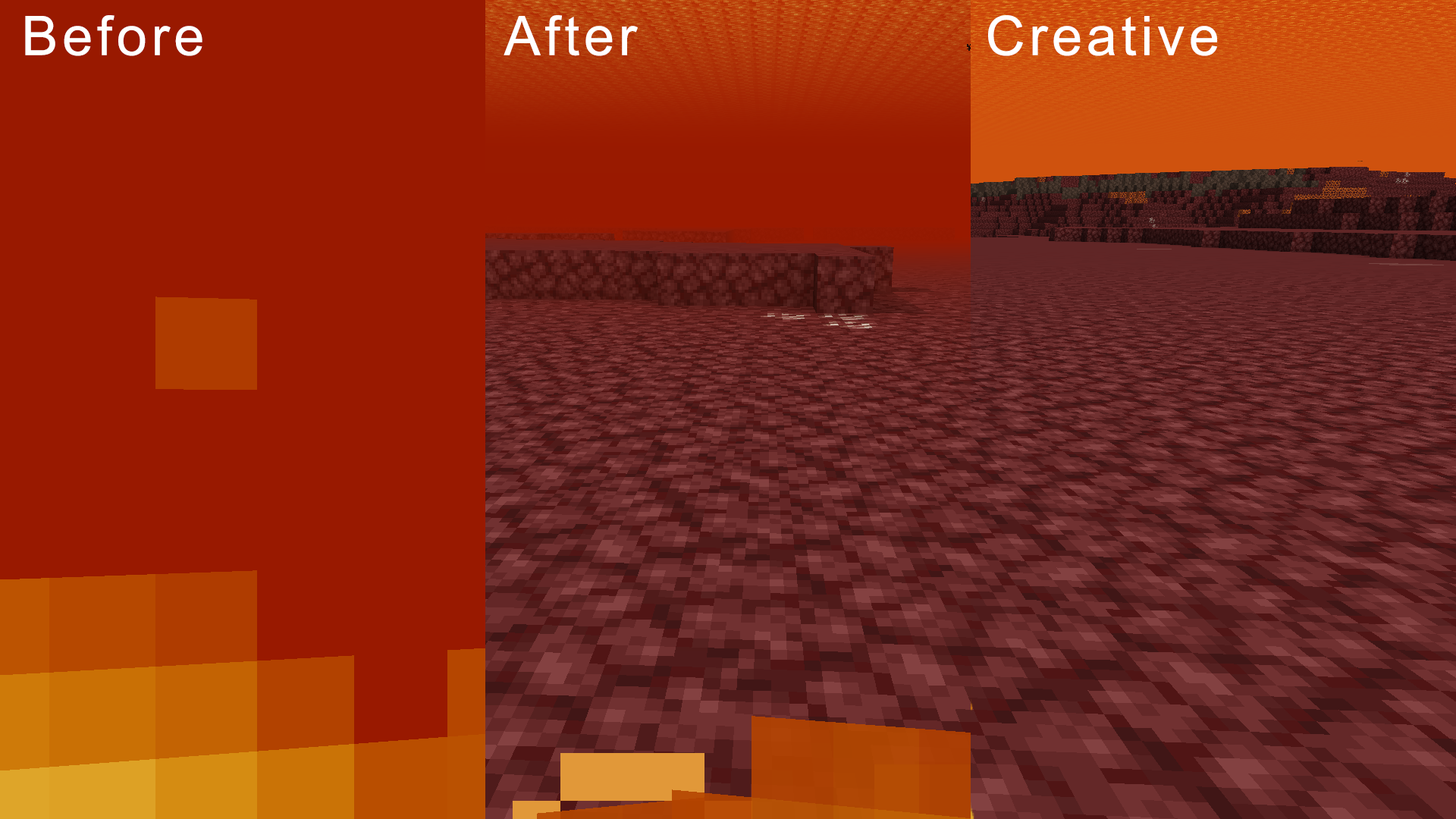
<style>
.page{position:relative;width:1456px;height:819px;background:#991900}
.page>*{position:absolute;margin:0}
.t1{font:54.6px "ArialMT";letter-spacing:0.08em;color:#ffffff}
</style>
<div class="page">
<p class="t1" style="left:25px;top:15px;width:177px;height:41px">Before</p>
<p class="t1" style="left:504px;top:15px;width:134px;height:41px">After</p>
<p class="t1" style="left:988px;top:15px;width:230px;height:41px">Creative</p>
</div>
